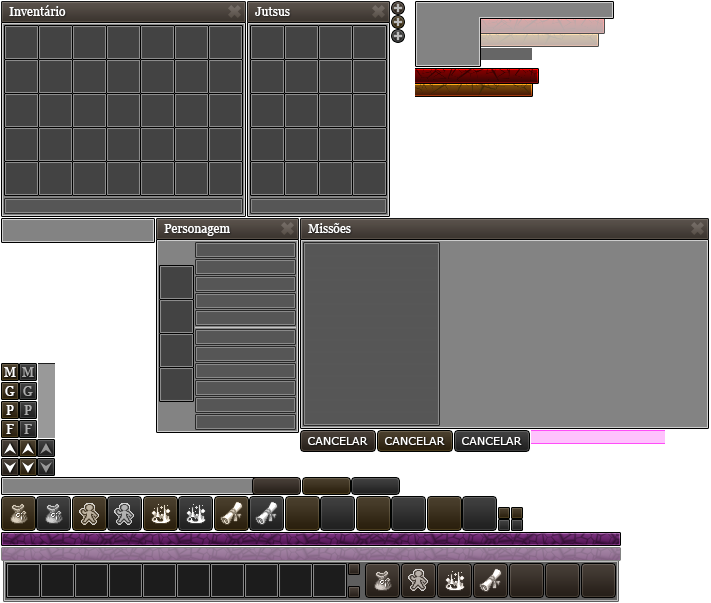
<style>
.page{position:relative;width:711px;height:603px;background:#ffffff}
.page>*{position:absolute;margin:0}
.t1{font:12px "Georgia";letter-spacing:0.005em;color:#ffffff}
.t2{font:13px "Georgia";letter-spacing:0.005em;color:#ffffff}
.t3{font:13px "Georgia";letter-spacing:0.005em;color:#adadad}
.t4{font:13px "Georgia";letter-spacing:0.005em;color:#acacac}
.t5{font:11px "Verdana";letter-spacing:0.005em;color:#ffffff}
</style>
<div class="page">
<p class="t1" style="left:9px;top:5px;width:57px;height:11px">Inventário</p>
<p class="t1" style="left:255px;top:7px;width:35px;height:9px">Jutsus</p>
<p class="t1" style="left:164px;top:224px;width:66px;height:12px">Personagem</p>
<p class="t1" style="left:308px;top:223px;width:43px;height:10px">Missões</p>
<p class="t2" style="left:4px;top:367px;width:12px;height:10px">M</p>
<p class="t3" style="left:22px;top:367px;width:12px;height:10px">M</p>
<p class="t2" style="left:5px;top:386px;width:10px;height:10px">G</p>
<p class="t4" style="left:23px;top:386px;width:10px;height:10px">G</p>
<p class="t2" style="left:6px;top:405px;width:8px;height:10px">P</p>
<p class="t3" style="left:24px;top:405px;width:8px;height:10px">P</p>
<p class="t2" style="left:6px;top:424px;width:8px;height:10px">F</p>
<p class="t3" style="left:24px;top:424px;width:8px;height:10px">F</p>
<p class="t5" style="left:308px;top:437px;width:60px;height:8px">CANCELAR</p>
<p class="t5" style="left:385px;top:437px;width:60px;height:8px">CANCELAR</p>
<p class="t5" style="left:462px;top:437px;width:60px;height:8px">CANCELAR</p>
</div>
